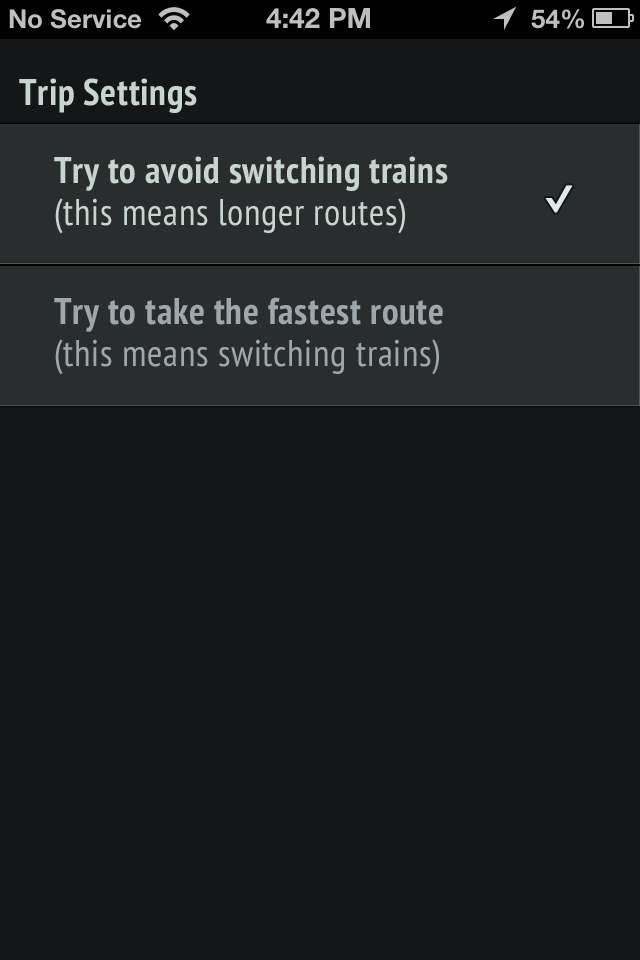
<style>
.page{position:relative;width:640px;height:960px;background:#141617}
.page>*{position:absolute;margin:0}
.t1{font:37.1px "PTSans-NarrowBold";letter-spacing:0.02em;color:#c7d4cf}
.t2{font:37.1px/41.7px "PTSans-NarrowBold";letter-spacing:0.02em;color:#c7d4cf}
.t3{font:37.1px/41.7px "PTSans-Narrow";letter-spacing:0.02em;color:#c7d4cf}
.t4{font:37.1px/41.7px "PTSans-NarrowBold";letter-spacing:0.02em;color:#9ea7ab}
.t5{font:37.1px/41.7px "PTSans-Narrow";letter-spacing:0.02em;color:#9ea7ab}
</style>
<div class="page">
<p class="t1" style="left:19px;top:78px;width:178px;height:35px">Trip Settings</p>
<p class="t2" style="left:54px;top:156px;width:394px;height:78px">Try to avoid switching trains<br><span class="t3">(this means longer routes)</span></p>
<p class="t4" style="left:54px;top:297px;width:389px;height:78px">Try to take the fastest route<br><span class="t5">(this means switching trains)</span></p>
</div>
